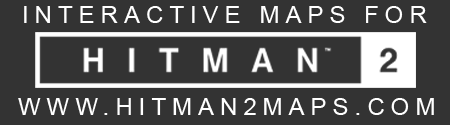
<style>
.page{position:relative;width:450px;height:125px;background:#333333}
.page>*{position:absolute;margin:0}
.t1{font:24px "ArialMT";letter-spacing:0.25em;color:#ffffff}
</style>
<div class="page">
<p class="t1" style="left:24px;top:6px;width:403px;height:17px">INTERACTIVE MAPS FOR</p>
<p class="t1" style="left:18px;top:98px;width:416px;height:17px">WWW.HITMAN2MAPS.COM</p>
</div>
